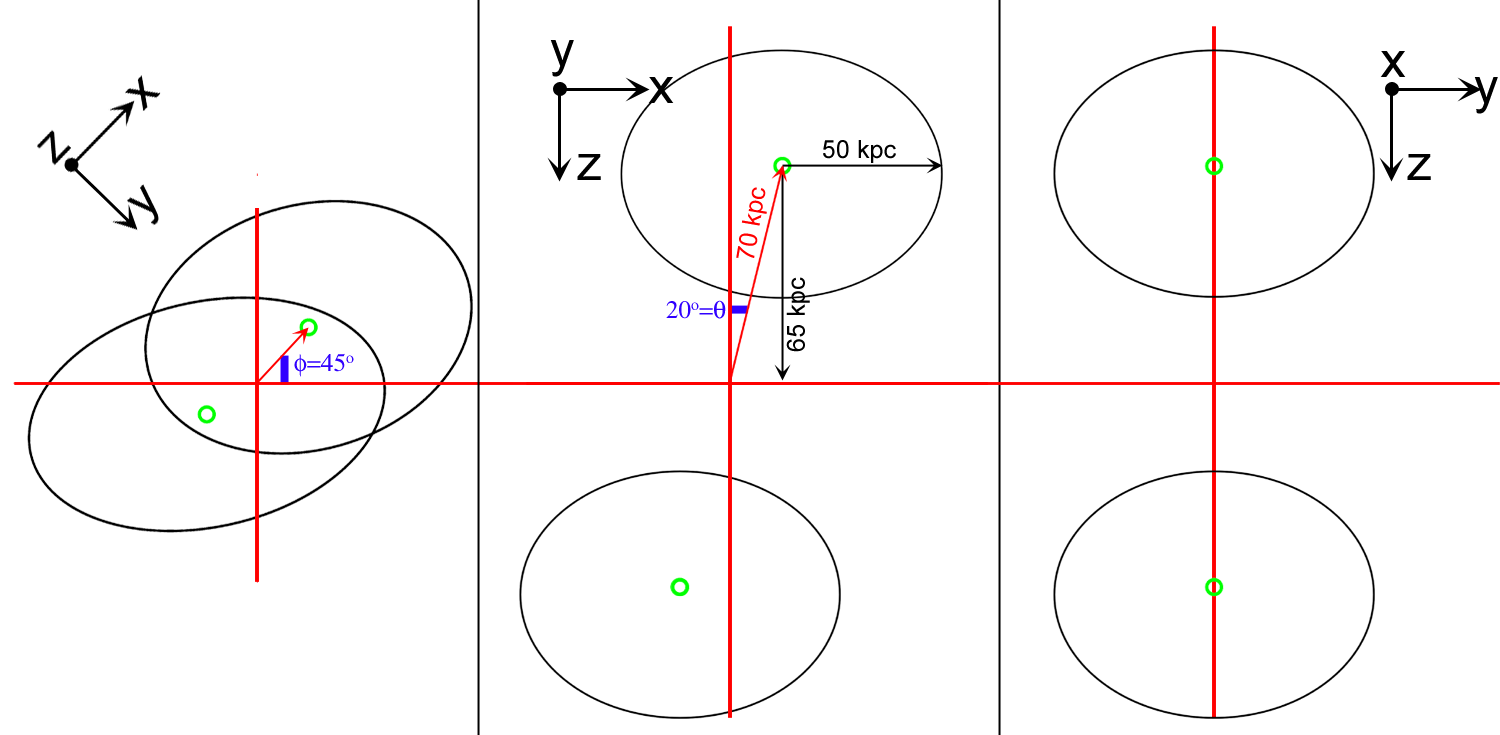
<style>
.page{position:relative;width:1500px;height:735px;background:#ffffff}
.page>*{position:absolute;margin:0}
.t1{font:50px "ArialMT";color:#000000}
.t2{font:25px "ArialMT";color:#000000}
.t3{font:25px "ArialMT";color:#ff0000}
</style>
<div class="page">
<p class="t1" style="left:550px;top:40px;width:24px;height:37px">y</p>
<p class="t1" style="left:1380px;top:51px;width:26px;height:26px">x</p>
<p class="t1" style="left:648px;top:77px;width:26px;height:26px">x</p>
<p class="t1" style="left:1474px;top:77px;width:24px;height:37px">y</p>
<p class="t2" style="left:823px;top:140px;width:73px;height:23px">50 kpc</p>
<p class="t1" style="left:577px;top:154px;width:24px;height:26px">z</p>
<p class="t1" style="left:1407px;top:154px;width:24px;height:26px">z</p>
<p class="t3" style="left:736px;top:187px;width:31px;height:71px;rotate:-80deg">70 kpc</p>
<p class="t2" style="left:786px;top:277px;width:24px;height:75px;rotate:-90deg">65 kpc</p>
</div>
